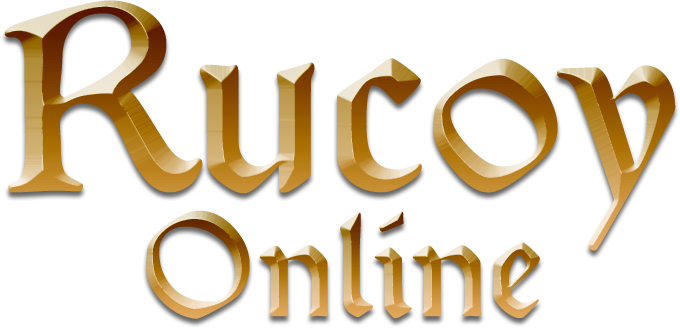
<style>
.page{position:relative;width:680px;height:328px;background:#ffffff}
.page>*{position:absolute;margin:0}
.t1{font:266.4px "P22MorrisTroy"}
.t2{font:147.4px "P22MorrisTroy"}
</style>
<div class="page">
<p class="t1" style="left:4px;top:0px;width:672px;height:251px">Rucoy</p>
<p class="t2" style="left:146px;top:210px;width:394px;height:109px">Online</p>
</div>
